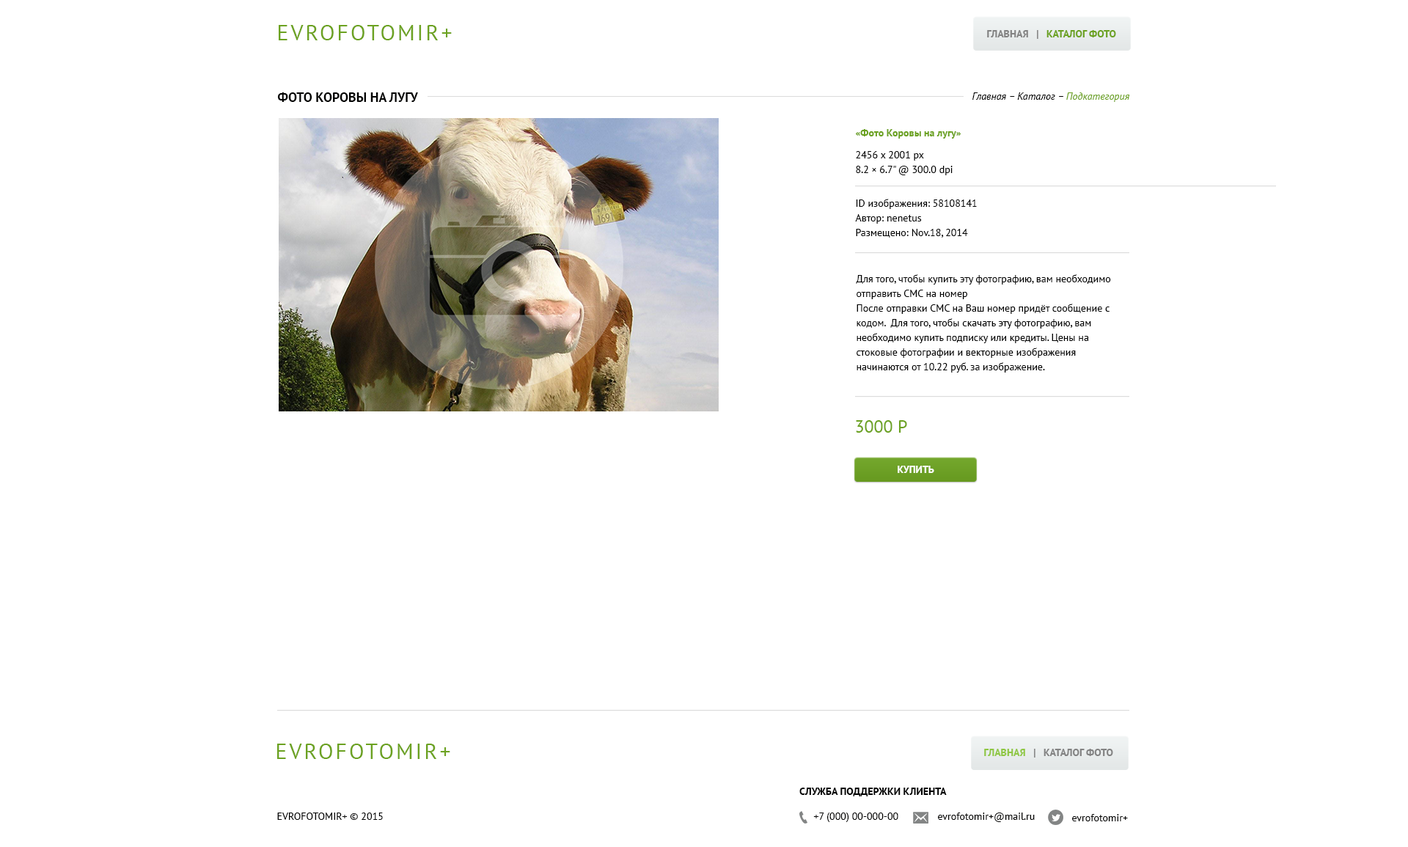
<style>
.page{position:relative;width:1408px;height:847px;background:#ffffff}
.page>*{position:absolute;margin:0}
.t1{font:22px "PTSans-Regular";letter-spacing:0.1em;color:#6ca221;text-transform:uppercase}
.t2{font:10.3px "PTSans-Bold";color:#6ca221;text-transform:uppercase}
.t3{font:10.3px "PTSans-Bold";color:#838383;text-transform:uppercase}
.t4{font:13.2px "PTSans-Bold";color:#010100;text-transform:uppercase}
.t5{font:10.3px "PTSans-Italic";color:#000000}
.t6{font:10.3px "PTSans-Italic";color:#6ca221}
.t7{font:10.3px "PTSans-Bold";color:#6ca221}
.t8{font:10.3px/14.7px "PTSans-Regular";color:#000000}
.t9{font:17.6px "PTSans-Regular";color:#6ca221}
.t10{font:10.3px "PTSans-Bold";color:#ffffff;text-transform:uppercase}
.t11{font:10.3px "PTSans-Bold";color:#8fc742;text-transform:uppercase}
.t12{font:10.3px "PTSans-Bold";color:#000000;text-transform:uppercase}
.t13{font:10.3px "PTSans-Regular";color:#010100;text-transform:uppercase}
.t14{font:10.3px "PTSans-Regular";color:#010100}
</style>
<div class="page">
<p class="t1" style="left:279px;top:25px;width:173px;height:15px">EVROFOTOMIR+</p>
<p class="t2" style="left:987px;top:30px;width:129px;height:9px"><span class="t3">Главная   |   </span>Каталог фото</p>
<p class="t4" style="left:277px;top:92px;width:141px;height:10px">Фото Коровы на лугу</p>
<p class="t5" style="left:972px;top:92px;width:158px;height:10px">Главная – Каталог – <span class="t6">Подкатегория</span></p>
<p class="t7" style="left:855px;top:129px;width:106px;height:10px">«Фото Коровы на лугу»</p>
<p class="t8" style="left:856px;top:151px;width:97px;height:24px">2456 x 2001 px<br>8.2 × 6.7" @ 300.0 dpi</p>
<p class="t8" style="left:855px;top:199px;width:122px;height:39px">ID изображения: 58108141<br>Автор: nenetus<br>Размещено: Nov.18, 2014</p>
<p class="t8" style="left:856px;top:274px;width:255px;height:99px">Для того, чтобы купить эту фотографию, вам необходимо отправить СМС на номер<br>После отправки СМС на Ваш номер придёт сообщение с кодом.  Для того, чтобы скачать эту фотографию, вам необходимо купить подписку или кредиты. Цены на стоковые фотографии и векторные изображения начинаются от 10.22 руб. за изображение.</p>
<p class="t9" style="left:856px;top:420px;width:51px;height:13px">3000 Р</p>
<p class="t10" style="left:898px;top:466px;width:36px;height:7px">Купить</p>
<p class="t1" style="left:277px;top:744px;width:173px;height:15px">EVROFOTOMIR+</p>
<p class="t3" style="left:984px;top:749px;width:129px;height:8px"><span class="t11">Главная</span>   |   Каталог фото</p>
<p class="t12" style="left:799px;top:788px;width:148px;height:8px">Служба поддержки клиента</p>
<p class="t13" style="left:277px;top:812px;width:106px;height:8px">EVROFOTOMIR+ © 2015</p>
<p class="t14" style="left:813px;top:812px;width:85px;height:10px">+7 (000) 00-000-00</p>
<p class="t14" style="left:938px;top:812px;width:97px;height:10px">evrofotomir+@mail.ru</p>
<p class="t14" style="left:1072px;top:814px;width:56px;height:7px">evrofotomir+</p>
</div>
